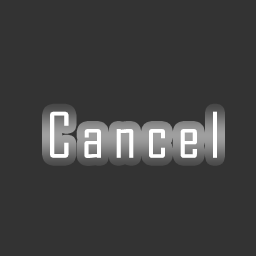
<style>
.page{position:relative;width:256px;height:256px;background:#333333}
.page>*{position:absolute;margin:0}
.t1{font:60px "AgencyFB-Reg";letter-spacing:0.16em;color:#ffffff}
</style>
<div class="page">
<p class="t1" style="left:50px;top:111px;width:167px;height:47px">Cancel</p>
</div>
